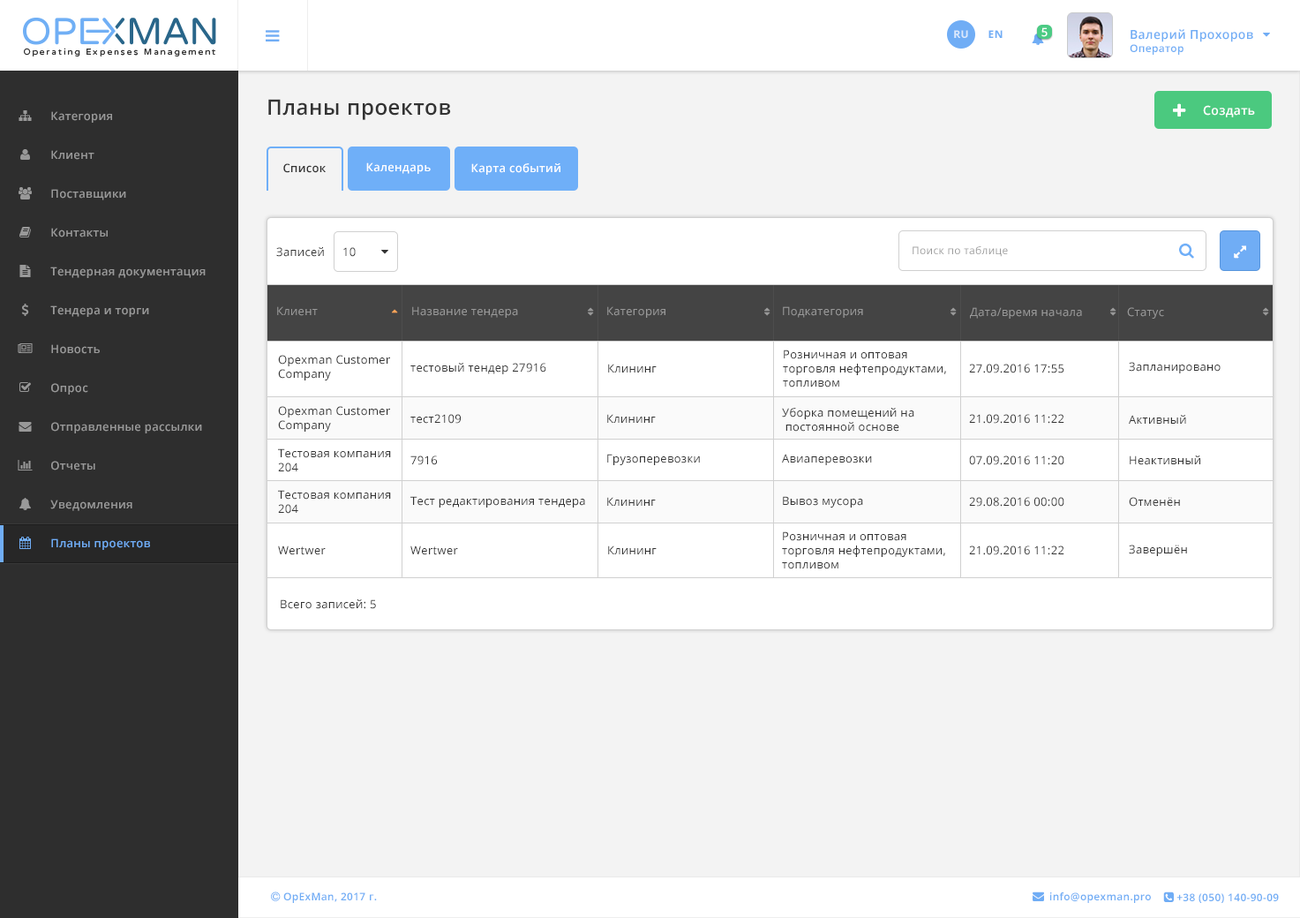
<style>
.page{position:relative;width:1300px;height:918px;background:#f3f3f3}
.page>*{position:absolute;margin:0}
.t1{font:10.6px "OpenSans-Bold";letter-spacing:0.025em;color:#dbe8fc;text-transform:uppercase}
.t2{font:10.6px "OpenSans-Bold";letter-spacing:0.025em;color:#70adf5;text-transform:uppercase}
.t3{font:11.5px "OpenSans-Semibold";letter-spacing:0.025em;color:#ffffff}
.t4{font:12.4px "OpenSans-Semibold";letter-spacing:0.025em;color:#70adf5}
.t5{font:10.6px "OpenSans-Semibold";letter-spacing:0.025em;color:#70adf5}
.t6{font:21.2px "OpenSans-Semibold";letter-spacing:0.025em;color:#333333}
.t7{font:11.5px "OpenSans-Semibold";letter-spacing:0.025em;color:#999999}
.t8{font:12.3px "OpenSans-Semibold";letter-spacing:0.025em;color:#ffffff}
.t9{font:11.5px "OpenSans-Semibold";letter-spacing:0.025em;color:#333333}
.t10{font:11.5px "OpenSans";letter-spacing:0.025em;color:#333333}
.t11{font:10.6px "OpenSans";letter-spacing:0.025em;color:#999999}
.t12{font:11.5px "OpenSans";letter-spacing:0.025em;color:#999999}
.t13{font:11.5px "OpenSans-Semibold";letter-spacing:0.025em;color:#70adf5}
</style>
<div class="page">
<p class="t1" style="left:954px;top:30px;width:14px;height:8px">Ru</p>
<p class="t2" style="left:988px;top:30px;width:14px;height:8px">EN</p>
<p class="t3" style="left:1041px;top:27px;width:6px;height:10px">5</p>
<p class="t4" style="left:1129px;top:29px;width:124px;height:26px">Валерий Прохоров<br><span class="t5">Оператор</span></p>
<p class="t6" style="left:268px;top:99px;width:183px;height:21px">Планы проектов</p>
<p class="t7" style="left:51px;top:111px;width:61px;height:12px">Категория</p>
<p class="t8" style="left:1203px;top:105px;width:52px;height:12px">Создать</p>
<p class="t7" style="left:51px;top:150px;width:43px;height:10px">Клиент</p>
<p class="t9" style="left:283px;top:163px;width:43px;height:10px">Список</p>
<p class="t3" style="left:366px;top:162px;width:65px;height:12px">Календарь</p>
<p class="t3" style="left:471px;top:163px;width:89px;height:12px">Карта событий</p>
<p class="t7" style="left:51px;top:189px;width:75px;height:11px">Поставщики</p>
<p class="t7" style="left:51px;top:228px;width:57px;height:9px">Контакты</p>
<p class="t10" style="left:276px;top:247px;width:48px;height:10px">Записей</p>
<p class="t10" style="left:343px;top:247px;width:13px;height:10px">10</p>
<p class="t11" style="left:912px;top:246px;width:96px;height:11px">Поиск по таблице</p>
<p class="t7" style="left:50px;top:266px;width:156px;height:12px">Тендерная документация</p>
<p class="t7" style="left:50px;top:305px;width:99px;height:12px">Тендера и торги</p>
<p class="t12" style="left:277px;top:306px;width:41px;height:10px">Клиент</p>
<p class="t12" style="left:412px;top:306px;width:106px;height:12px">Название тендера</p>
<p class="t12" style="left:607px;top:306px;width:58px;height:12px">Категория</p>
<p class="t12" style="left:783px;top:306px;width:80px;height:12px">Подкатегория</p>
<p class="t12" style="left:970px;top:307px;width:112px;height:11px">Дата/время начала</p>
<p class="t12" style="left:1127px;top:307px;width:37px;height:11px">Статус</p>
<p class="t7" style="left:51px;top:344px;width:49px;height:10px">Новость</p>
<p class="t10" style="left:783px;top:349px;width:163px;height:38px">Розничная и оптовая <br>торговля нефтепродуктами, <br>топливом</p>
<p class="t10" style="left:278px;top:355px;width:112px;height:25px">Opexman Customer <br>Company</p>
<p class="t10" style="left:410px;top:363px;width:136px;height:11px">тестовый тендер 27916</p>
<p class="t10" style="left:608px;top:363px;width:48px;height:9px">Клининг</p>
<p class="t10" style="left:969px;top:363px;width:95px;height:10px">27.09.2016 17:55</p>
<p class="t10" style="left:1128px;top:362px;width:92px;height:11px">Запланировано</p>
<p class="t7" style="left:51px;top:383px;width:37px;height:11px">Опрос</p>
<p class="t10" style="left:278px;top:406px;width:112px;height:25px">Opexman Customer <br>Company</p>
<p class="t10" style="left:410px;top:414px;width:51px;height:9px">тест2109</p>
<p class="t10" style="left:607px;top:414px;width:49px;height:9px">Клининг</p>
<p class="t10" style="left:782px;top:408px;width:132px;height:23px">Уборка помещений на<br> постоянной основе</p>
<p class="t10" style="left:969px;top:414px;width:95px;height:9px">21.09.2016 11:22</p>
<p class="t7" style="left:51px;top:422px;width:151px;height:11px">Отправленные рассылки</p>
<p class="t10" style="left:1128px;top:415px;width:58px;height:8px">Активный</p>
<p class="t10" style="left:278px;top:448px;width:113px;height:24px">Тестовая компания <br>204</p>
<p class="t7" style="left:51px;top:461px;width:44px;height:9px">Отчеты</p>
<p class="t10" style="left:410px;top:455px;width:27px;height:10px">7916</p>
<p class="t10" style="left:607px;top:453px;width:93px;height:12px">Грузоперевозки</p>
<p class="t10" style="left:782px;top:453px;width:90px;height:12px">Авиаперевозки</p>
<p class="t10" style="left:969px;top:455px;width:95px;height:10px">07.09.2016 11:20</p>
<p class="t10" style="left:1129px;top:455px;width:71px;height:10px">Неактивный</p>
<p class="t10" style="left:278px;top:490px;width:113px;height:23px">Тестовая компания <br>204</p>
<p class="t10" style="left:410px;top:496px;width:175px;height:11px">Тест редактирования тендера</p>
<p class="t10" style="left:607px;top:497px;width:49px;height:9px">Клининг</p>
<p class="t10" style="left:783px;top:496px;width:80px;height:11px">Вывоз мусора</p>
<p class="t10" style="left:969px;top:497px;width:95px;height:9px">29.08.2016 00:00</p>
<p class="t10" style="left:1128px;top:497px;width:52px;height:9px">Отменён</p>
<p class="t7" style="left:50px;top:499px;width:82px;height:12px">Уведомления</p>
<p class="t10" style="left:782px;top:531px;width:163px;height:38px">Розничная и оптовая <br>торговля нефтепродуктами,<br>топливом</p>
<p class="t13" style="left:51px;top:538px;width:99px;height:12px">Планы проектов</p>
<p class="t10" style="left:278px;top:545px;width:48px;height:10px">Wertwer</p>
<p class="t10" style="left:410px;top:545px;width:48px;height:10px">Wertwer</p>
<p class="t10" style="left:608px;top:545px;width:48px;height:9px">Клининг</p>
<p class="t10" style="left:969px;top:545px;width:95px;height:10px">21.09.2016 11:22</p>
<p class="t10" style="left:1128px;top:544px;width:59px;height:12px">Завершён</p>
<p class="t10" style="left:281px;top:599px;width:95px;height:10px">Всего записей: 5</p>
</div>
